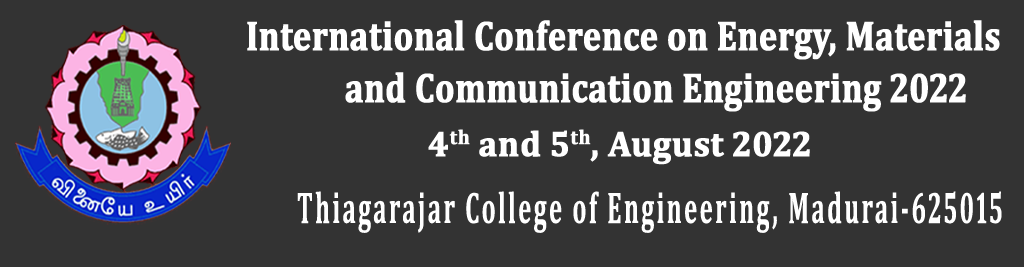
<style>
.page{position:relative;width:1024px;height:267px;background:#333333}
.page>*{position:absolute;margin:0}
.t1{font:41.7px "Cambria-Bold";color:#ffffff;font-weight:bold;scale:0.81 1}
.t2{font:35.7px "Cambria-Bold";color:#ffffff;font-weight:bold}
.t3{font:44.7px "Cambria-Bold";letter-spacing:0.1em;color:#ffffff;scale:0.55 1}
</style>
<div class="page">
<p class="t1" style="left:247px;top:20px;width:753px;height:40px">International Conference on Energy, Materials</p>
<p class="t1" style="left:345px;top:72px;width:621px;height:40px">and Communication Engineering 2022</p>
<p class="t2" style="left:428px;top:129px;width:382px;height:36px">4th and 5th, August 2022</p>
<p class="t3" style="left:297px;top:191px;width:705px;height:42px">Thiagarajar College of Engineering, Madurai-625015</p>
</div>
